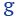
<style>
.page{position:relative;width:18px;height:18px;background:#ffffff}
.page>*{position:absolute;margin:0}
.t1{font:20px "PTSerif-Regular";color:#133b95}
</style>
<div class="page">
<p class="t1" style="left:4px;top:2px;width:11px;height:14px">g</p>
</div>
